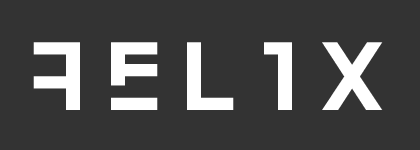
<style>
.page{position:relative;width:420px;height:150px;background:#333333}
.page>*{position:absolute;margin:0}
.t1{font:100px "YkarRegular";letter-spacing:0.2em;color:#ffffff}
</style>
<div class="page">
<p class="t1" style="left:33px;top:42px;width:47px;height:68px;rotate:180deg">F</p>
<p class="t1" style="left:111px;top:42px;width:272px;height:68px">ELIX</p>
</div>
